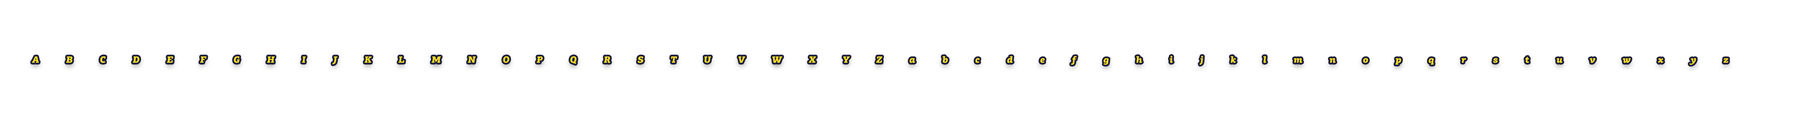
<style>
.page{position:relative;width:1799px;height:120px;background:#ffffff}
.page>*{position:absolute;margin:0}
.t1{font:9px "PFAgoraSlabPro-BlackItalic";letter-spacing:0.8em;color:#fbde27}
</style>
<div class="page">
<p class="t1" style="left:32px;top:56px;width:1696px;height:9px">A  B  C  D  E  F  G  H  I  J  K  L  M  N  O  P  Q  R  S  T  U  V  W  X  Y  Z  a  b  c  d  e  f  g  h  i  j  k  l  m  n  o  p  q  r  s  t  u  v  w  x  y  z</p>
</div>
